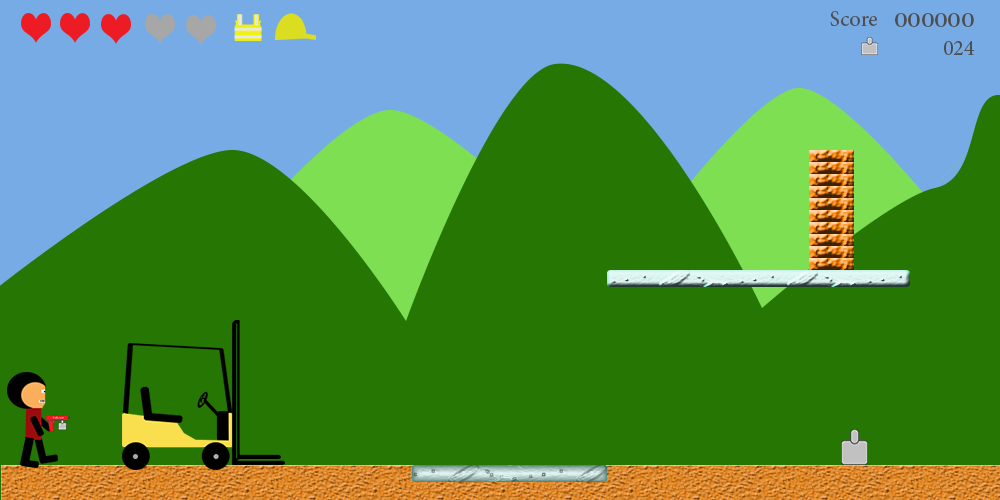
<style>
.page{position:relative;width:1000px;height:500px;background:#267604}
.page>*{position:absolute;margin:0}
.t1{font:30px "AdobeArabic-Regular";color:#4e4e4e}
.t2{font:29.7px "AdobeArabic-Regular";color:#4e4e4e;scale:1.27 1}
</style>
<div class="page">
<p class="t1" style="left:830px;top:11px;width:47px;height:15px">Score</p>
<p class="t2" style="left:895px;top:13px;width:79px;height:14px">000000</p>
<p class="t1" style="left:944px;top:41px;width:30px;height:14px">024</p>
</div>
